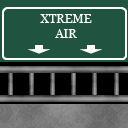
<style>
.page{position:relative;width:128px;height:128px;background:#205340}
.page>*{position:absolute;margin:0}
.t1{font:12px "Georgia";color:#ffffff}
</style>
<div class="page">
<p class="t1" style="left:40px;top:14px;width:52px;height:24px;text-align:center">XTREME<br>AIR</p>
</div>
